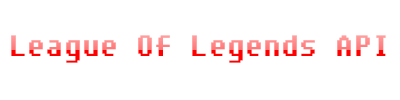
<style>
.page{position:relative;width:400px;height:100px;background:#ffffff}
.page>*{position:absolute;margin:0}
.t1{font:29px "Fixedsys"}
</style>
<div class="page">
<p class="t1" style="left:11px;top:35px;width:375px;height:28px">League Of Legends API</p>
</div>
